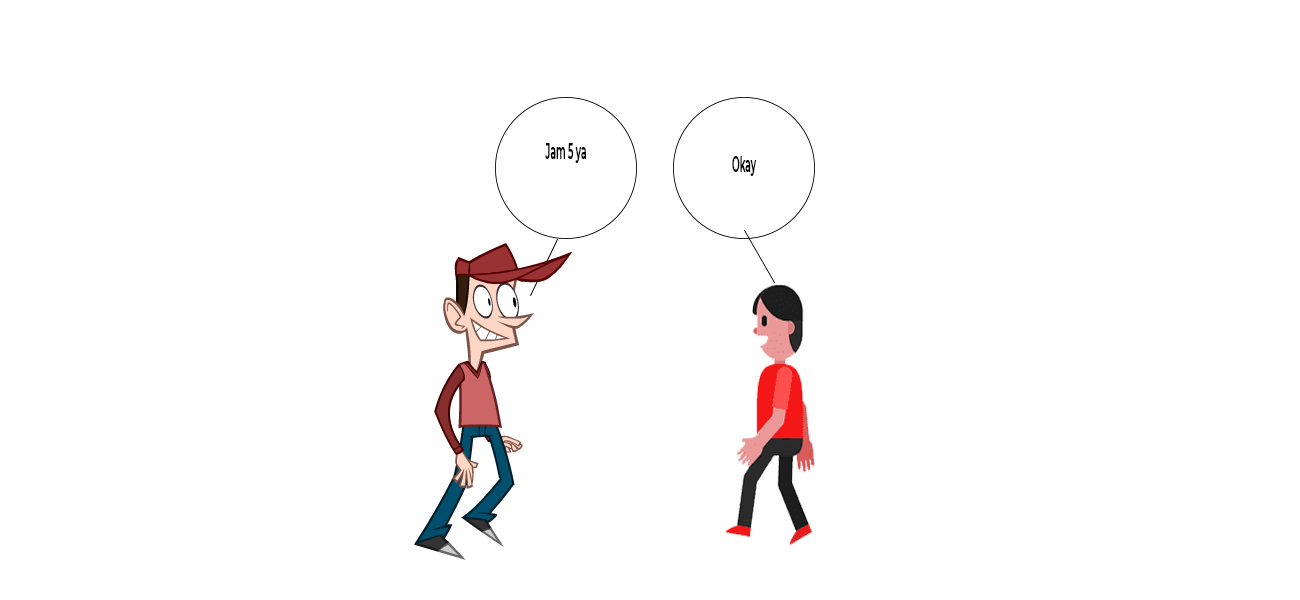
<style>
.page{position:relative;width:1300px;height:600px;background:#ffffff}
.page>*{position:absolute;margin:0}
.t1{font:21.1px "Montserrat-SemiBold";color:#000000;scale:0.43 1}
</style>
<div class="page">
<p class="t1" style="left:545px;top:143px;width:41px;height:20px">Jam 5 ya</p>
<p class="t1" style="left:732px;top:156px;width:25px;height:20px">Okay</p>
</div>
